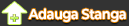
<style>
.page{position:relative;width:129px;height:26px;background:#333333}
.page>*{position:absolute;margin:0}
.t1{font:14.3px "Montserrat-Bold";letter-spacing:-0.04em;color:#ffffff;scale:0.9 1}
</style>
<div class="page">
<p class="t1" style="left:28px;top:8px;width:98px;height:14px">Adauga Stanga</p>
</div>
